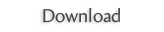
<style>
.page{position:relative;width:164px;height:32px;background:#ffffff}
.page>*{position:absolute;margin:0}
.t1{font:18.7px "Amira-Roman";color:#474747}
</style>
<div class="page">
<p class="t1" style="left:43px;top:8px;width:77px;height:15px">Download</p>
</div>
